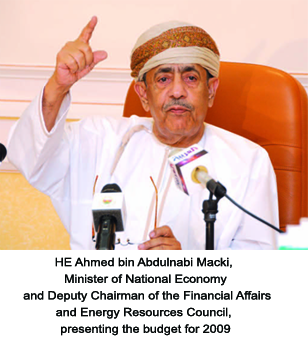
<style>
.page{position:relative;width:308px;height:343px;background:#ffffff}
.page>*{position:absolute;margin:0}
.t1{font:11.5px/16.7px "ArialMT";color:#060808;scale:1.09 1}
</style>
<div class="page">
<p class="t1" style="left:23px;top:257px;width:248px;height:79px;text-align:center">HE Ahmed bin Abdulnabi Macki, <br>Minister of National Economy<br> and Deputy Chairman of the Financial Affairs<br>and Energy Resources Council, <br>presenting the budget for 2009</p>
</div>
